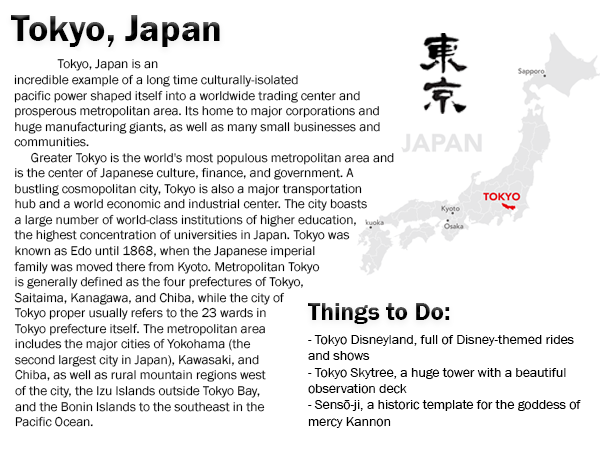
<style>
.page{position:relative;width:600px;height:450px;background:#ffffff}
.page>*{position:absolute;margin:0}
.t1{font:38.1px "FranklinGothic-Demi";color:#000000}
.t2{font:13px "FranklinGothic-Book";color:#000000}
.t3{font:25px "FranklinGothic-Demi";color:#000000}
.t4{font:13.6px "FranklinGothic-Book";color:#000000}
</style>
<div class="page">
<p class="t1" style="left:11px;top:15px;width:209px;height:32px">Tokyo, Japan</p>
<p class="t2" style="left:14px;top:59px;width:380px;height:368px">Tokyo, Japan is an incredible example of a long time culturally-isolated pacific power shaped itself into a worldwide trading center and prosperous metropolitan area. Its home to major corporations and huge manufacturing giants, as well as many small businesses and communities.<br>     Greater Tokyo is the world's most populous metropolitan area and is the center of Japanese culture, finance, and government. A bustling cosmopolitan city, Tokyo is also a major transportation hub and a world economic and industrial center. The city boasts a large number of world-class institutions of higher education, the highest concentration of universities in Japan. Tokyo was known as Edo until 1868, when the Japanese imperial family was moved there from Kyoto. Metropolitan Tokyo is generally defined as the four prefectures of Tokyo, Saitaima, Kanagawa, and Chiba, while the city of Tokyo proper usually refers to the 23 wards in Tokyo prefecture itself. The metropolitan area includes the major cities of Yokohama (the second largest city in Japan), Kawasaki, and Chiba, as well as rural mountain regions west of the city, the Izu Islands outside Tokyo Bay, and the Bonin Islands to the southeast in the Pacific Ocean.</p>
<p class="t3" style="left:308px;top:303px;width:142px;height:21px">Things to Do:</p>
<p class="t4" style="left:308px;top:335px;width:273px;height:93px">- Tokyo Disneyland, full of Disney-themed rides and shows<br>- Tokyo Skytree, a huge tower with a beautiful observation deck<br>- Sensō-ji, a historic template for the goddess of mercy Kannon</p>
</div>
